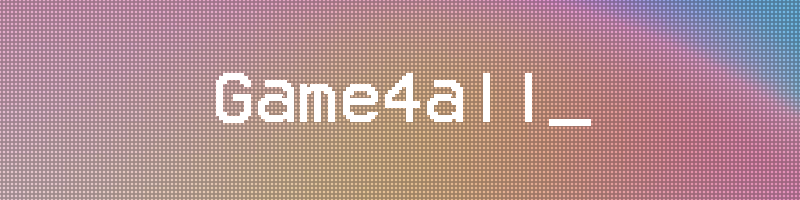
<style>
.page{position:relative;width:800px;height:200px}
.page>*{position:absolute;margin:0}
.t1{font:72px "VCROSDMono";color:#ffffff}
</style>
<div class="page">
<p class="t1" style="left:216px;top:73px;width:375px;height:53px">Game4all_</p>
<p class="t1" style="left:216px;top:73px;width:316px;height:50px">Game4all</p>
</div>
